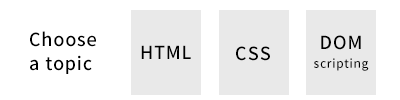
<style>
.page{position:relative;width:400px;height:100px;background:#ffffff}
.page>*{position:absolute;margin:0}
.t1{font:18px/24px "NotoSansJP-Medium";letter-spacing:0.05em;color:#000000}
.t2{font:12px/24px "NotoSansJP-Medium";letter-spacing:0.05em;color:#000000}
.t3{font:18px "NotoSansJP-Medium";letter-spacing:0.05em;color:#000000}
</style>
<div class="page">
<p class="t1" style="left:30px;top:31px;width:66px;height:43px">Choose<br>a topic</p>
<p class="t2" style="left:314px;top:35px;width:55px;height:36px;text-align:center"><span class="t1">DOM<br></span>scripting</p>
<p class="t3" style="left:141px;top:45px;width:50px;height:14px">HTML</p>
<p class="t3" style="left:236px;top:46px;width:34px;height:15px">CSS</p>
</div>
